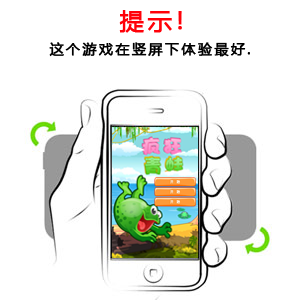
<style>
.page{position:relative;width:300px;height:300px;background:#ffffff}
.page>*{position:absolute;margin:0}
.t1{font:24px "MicrosoftYaHei";letter-spacing:0.15em;color:#ff0109;font-weight:bold}
.t2{font:14px "MicrosoftYaHei";letter-spacing:0.15em;color:#000000;font-weight:bold}
</style>
<div class="page">
<p class="t1" style="left:119px;top:10px;width:63px;height:23px">提示!</p>
<p class="t2" style="left:49px;top:42px;width:201px;height:15px">这个游戏在竖屏下体验最好.</p>
</div>
